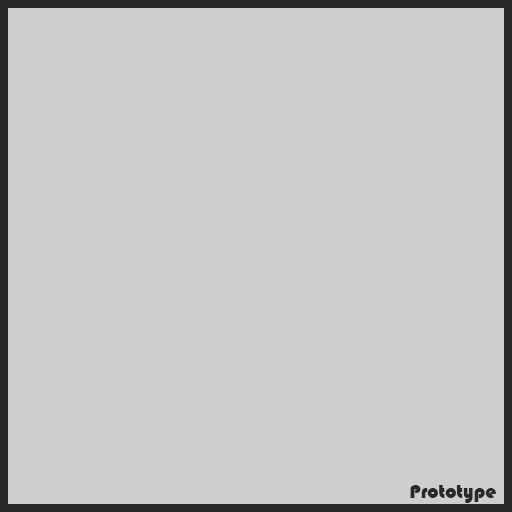
<style>
.page{position:relative;width:512px;height:512px;background:#cecece}
.page>*{position:absolute;margin:0}
.t1{font:20px "Bauhaus93";color:#282828}
</style>
<div class="page">
<p class="t1" style="left:410px;top:485px;width:86px;height:18px">Prototype</p>
</div>
